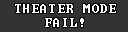
<style>
.page{position:relative;width:128px;height:32px;background:#333333}
.page>*{position:absolute;margin:0}
.t1{font:12px/14px "Terminal";letter-spacing:0.1em;color:#ffffff}
</style>
<div class="page">
<p class="t1" style="left:15px;top:4px;width:101px;height:23px;text-align:center">THEATER MODE<br>FAIL!</p>
</div>
